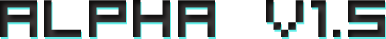
<style>
.page{position:relative;width:386px;height:39px;background:#ffffff}
.page>*{position:absolute;margin:0}
.t1{font:95px "VisitorTT2BRK";color:#2e2d2d}
</style>
<div class="page">
<p class="t1" style="left:0px;top:0px;width:385px;height:37px">Alpha v1.5</p>
</div>
